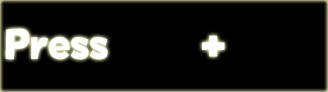
<style>
.page{position:relative;width:328px;height:92px;background:#000000}
.page>*{position:absolute;margin:0}
.t1{font:48px "HappyHell";color:#ffffff}
</style>
<div class="page">
<p class="t1" style="left:5px;top:28px;width:220px;height:32px">Press      +</p>
</div>
